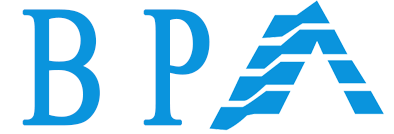
<style>
.page{position:relative;width:394px;height:134px;background:#ffffff}
.page>*{position:absolute;margin:0}
.t1{font:171.4px "MongolianBaiti";color:#0a94dd;font-weight:bold;scale:0.73 1}
</style>
<div class="page">
<p class="t1" style="left:22px;top:9px;width:188px;height:117px">B P</p>
</div>
